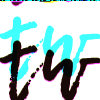
<style>
.page{position:relative;width:100px;height:100px;background:#ffffff}
.page>*{position:absolute;margin:0}
.t1{font:72.8px "LemonTuesday";color:#40ffff}
</style>
<div class="page">
<p class="t1" style="left:0px;top:16px;width:100px;height:64px">tw</p>
</div>
